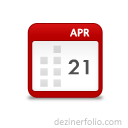
<style>
.page{position:relative;width:128px;height:128px;background:#ffffff}
.page>*{position:absolute;margin:0}
.t1{font:13.2px "AppleSymbols";letter-spacing:0.015em;color:#ffffff;font-weight:bold}
.t2{font:22.6px "TwCenMT-Regular";color:#4f4f4f;font-weight:bold}
.t3{font:10px "Calibri"}
</style>
<div class="page">
<p class="t1" style="left:70px;top:28px;width:20px;height:9px">APR</p>
<p class="t2" style="left:68px;top:59px;width:21px;height:16px">21</p>
<p class="t3" style="left:54px;top:118px;width:68px;height:7px">dezinerfolio.com</p>
</div>
